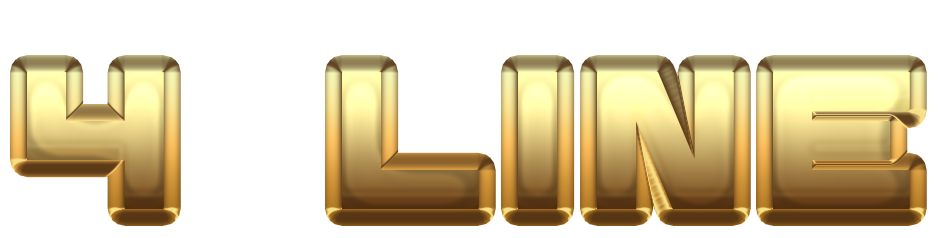
<style>
.page{position:relative;width:950px;height:238px;background:#ffffff}
.page>*{position:absolute;margin:0}
.t1{font:200px "Diagon";letter-spacing:0.15em}
</style>
<div class="page">
<p class="t1" style="left:27px;top:72px;width:883px;height:137px">4  LINE</p>
</div>
